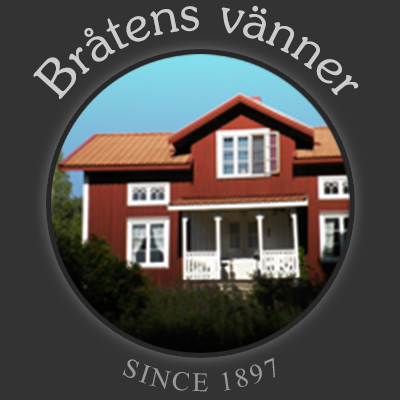
<style>
.page{position:relative;width:400px;height:400px;background:#333333}
.page>*{position:absolute;margin:0}
.t1{font:80px "JasmineUPC";color:#cccccc}
.t2{font:40px "MicrosoftHimalaya";letter-spacing:0.075em;color:#999999}
</style>
<div class="page">
<p class="t1" style="left:33px;top:5px;width:326px;height:94px">Bråtens vänner</p>
<p class="t2" style="left:122px;top:357px;width:153px;height:35px">SINCE 1897</p>
</div>
